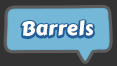
<style>
.page{position:relative;width:117px;height:66px;background:#74b7d7}
.page>*{position:absolute;margin:0}
.t1{font:20px "CarterOne";letter-spacing:0.025em;color:#ffffff}
</style>
<div class="page">
<p class="t1" style="left:22px;top:20px;width:71px;height:16px">Barrels</p>
</div>
